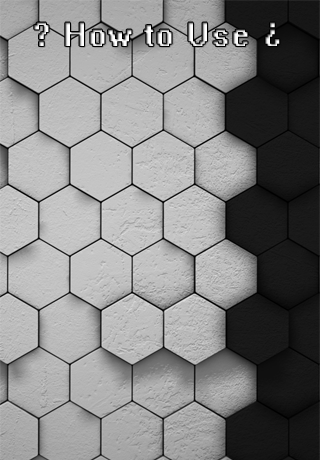
<style>
.page{position:relative;width:320px;height:460px}
.page>*{position:absolute;margin:0}
.t1{font:30px "System";letter-spacing:0.05em}
</style>
<div class="page">
<p class="t1" style="left:34px;top:22px;width:246px;height:24px">? How to Use ¿</p>
</div>
